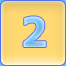
<style>
.page{position:relative;width:66px;height:66px}
.page>*{position:absolute;margin:0}
.t1{font:41px "Tahoma-Bold"}
</style>
<div class="page">
<p class="t1" style="left:23px;top:16px;width:23px;height:31px">2</p>
<p class="t1" style="left:23px;top:16px;width:23px;height:31px">2</p>
</div>
